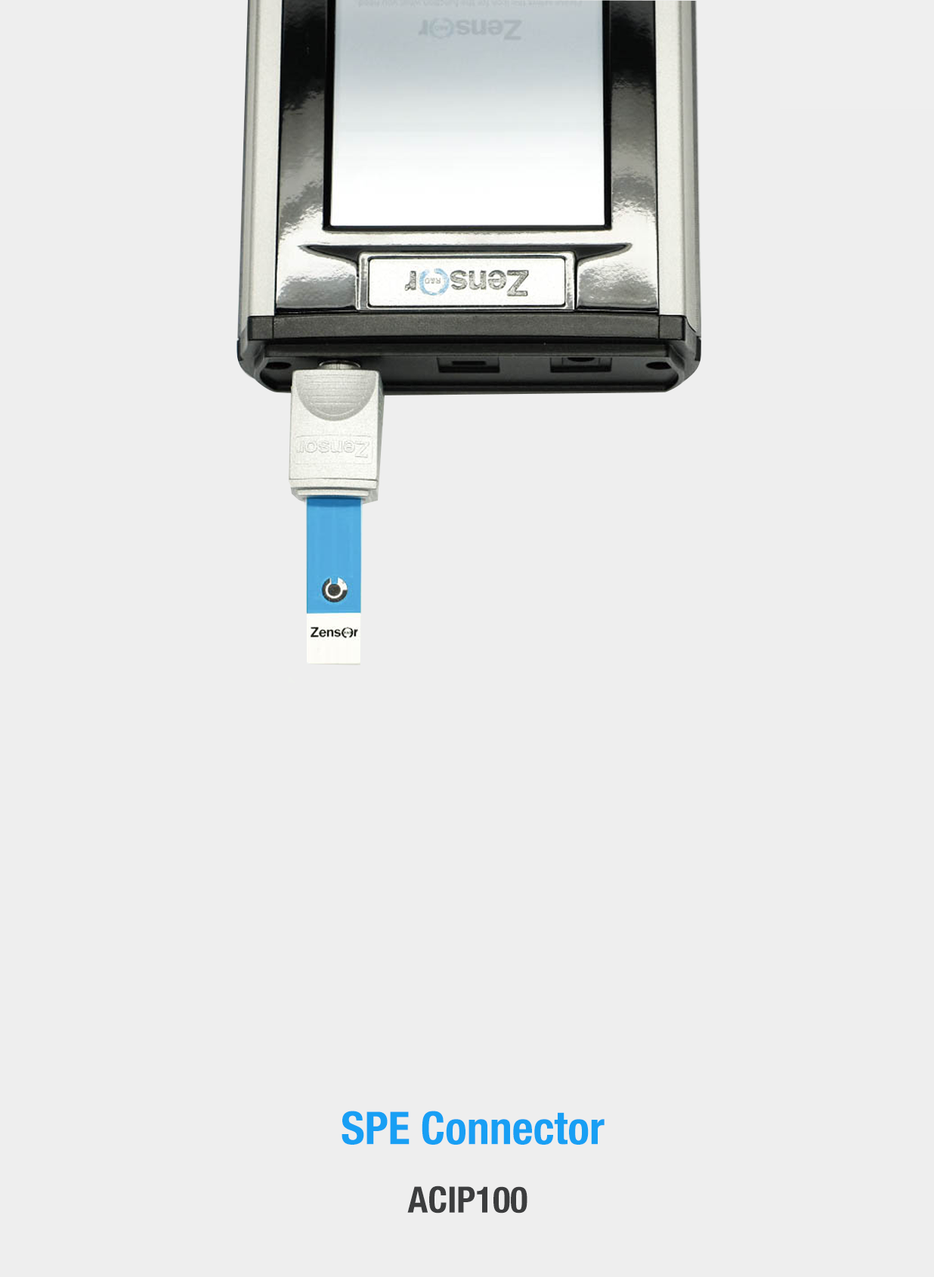
<style>
.page{position:relative;width:934px;height:1277px;background:#eeeeee}
.page>*{position:absolute;margin:0}
.t1{font:45.3px "HelveticaNeue-CondensedBold";color:#189ff4}
.t2{font:36.3px "HelveticaNeue-CondensedBold";color:#3c3d3e}
</style>
<div class="page">
<p class="t1" style="left:342px;top:1110px;width:263px;height:34px">SPE Connector</p>
<p class="t2" style="left:407px;top:1185px;width:121px;height:28px">ACIP100</p>
</div>
